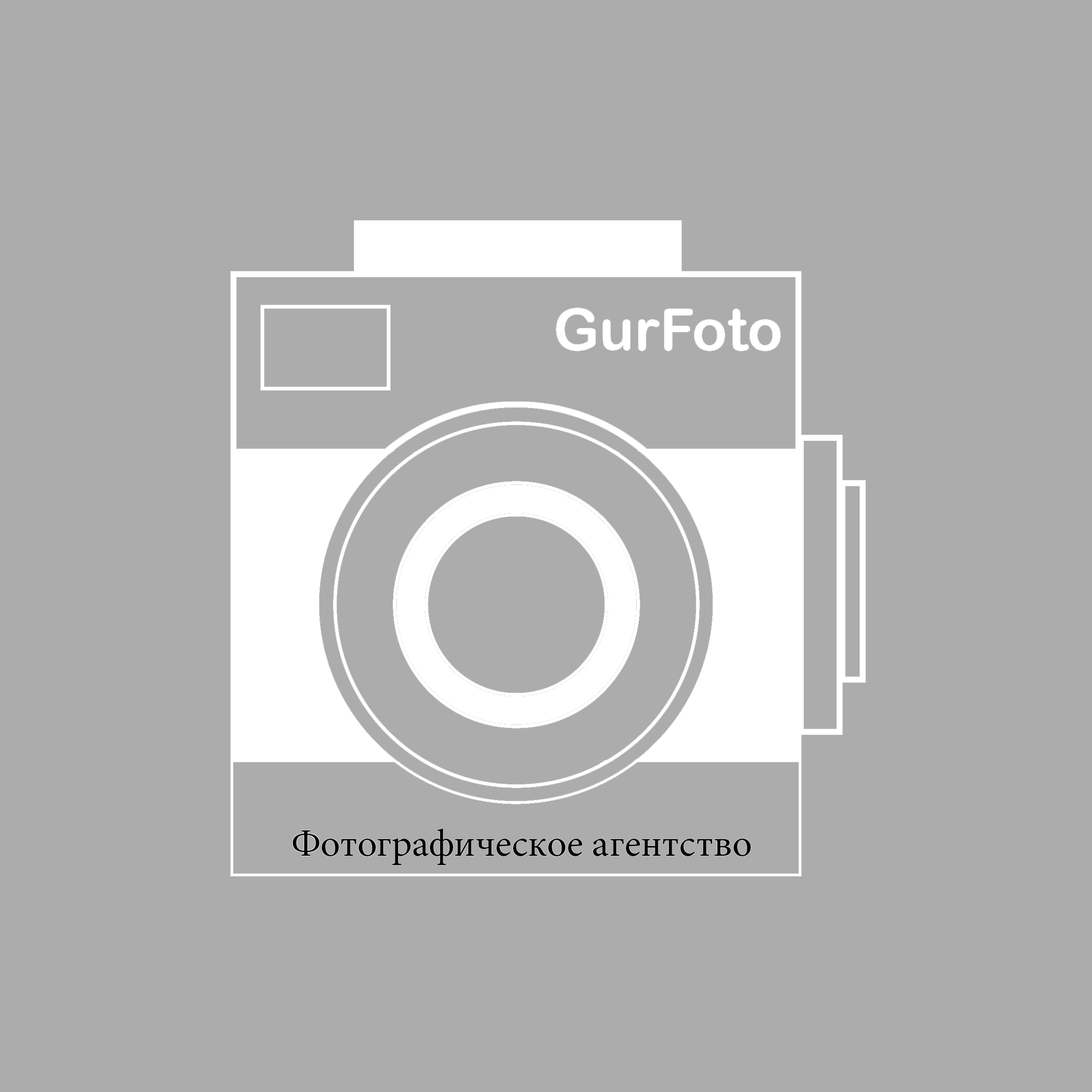
<style>
.page{position:relative;width:1092px;height:1092px;background:#acacac}
.page>*{position:absolute;margin:0}
.t1{font:38.5px "MinionPro-Regular";color:#000000}
</style>
<div class="page">
<p class="t1" style="left:293px;top:828px;width:458px;height:37px">Фотографическое агентство</p>
</div>
